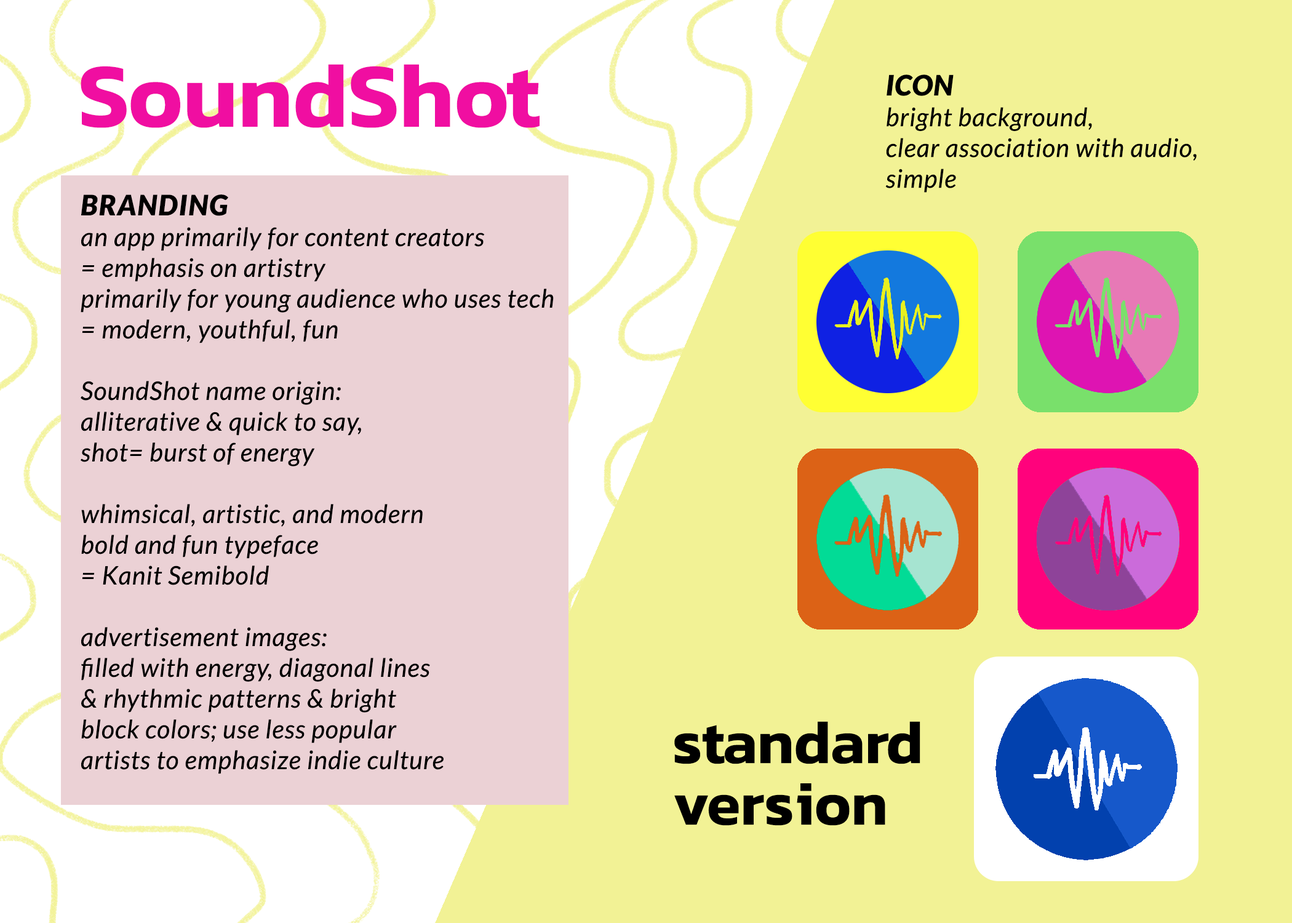
<style>
.page{position:relative;width:1292px;height:923px;background:#f2f295}
.page>*{position:absolute;margin:0}
.t1{font:92.3px "Kanit-SemiBold";color:#f00ea1}
.t2{font:25.6px/30.8px "Lato-Italic";letter-spacing:0.025em;color:#000000}
.t3{font:28.2px/30.8px "Lato-BlackItalic";letter-spacing:0.025em;color:#000000}
.t4{font:28.2px/30.8px "Lato-BlackItalic";letter-spacing:0.045em;color:#000000}
.t5{font:61.5px/61.5px "Kanit-SemiBold";color:#000000}
</style>
<div class="page">
<p class="t1" style="left:81px;top:64px;width:459px;height:64px">SoundShot</p>
<p class="t2" style="left:885px;top:74px;width:312px;height:119px"><span class="t3">ICON<br></span>bright background,<br>clear association with audio,<br>simple</p>
<p class="t2" style="left:81px;top:194px;width:473px;height:580px"><span class="t4">BRANDING<br></span>an app primarily for content creators<br>= emphasis on artistry<br>primarily for young audience who uses tech<br>= modern, youthful, fun<br><br>SoundShot name origin:<br>alliterative &amp; quick to say,<br>shot= burst of energy<br> <br>whimsical, artistic, and modern <br>bold and fun typeface<br>= Kanit Semibold <br><br>advertisement images: <br>filled with energy, diagonal lines<br>&amp; rhythmic patterns &amp; bright <br>block colors; use less popular <br>artists to emphasize indie culture</p>
<p class="t5" style="left:674px;top:721px;width:246px;height:105px">standard<br>version</p>
</div>
